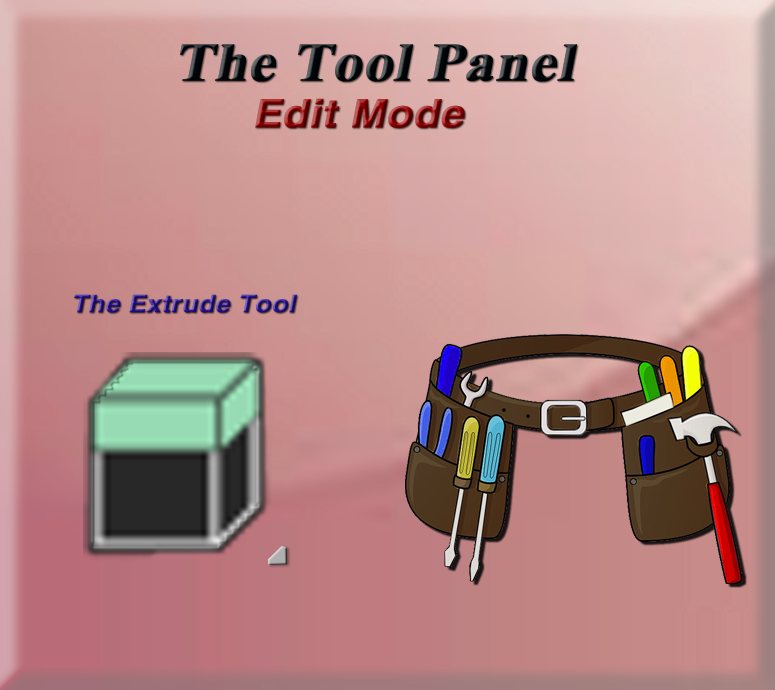
<style>
.page{position:relative;width:775px;height:690px}
.page>*{position:absolute;margin:0}
.t1{font:53.9px "TimesNewRomanPS-BoldMT";color:#000609;font-weight:bold;font-style:italic;scale:1.08 1}
.t2{font:39.1px "HelveticaLTStd-Bold";font-weight:bold;font-style:italic;scale:1.08 1}
.t3{font:53.9px "TimesNewRomanPS-BoldMT";font-weight:bold;font-style:italic;scale:1.08 1}
.t4{font:24.2px "HelveticaLTStd-Bold";font-weight:bold;font-style:italic;scale:1.08 1}
</style>
<div class="page">
<p class="t1" style="left:180px;top:44px;width:397px;height:38px">The Tool Panel</p>
<p class="t2" style="left:255px;top:98px;width:210px;height:30px"><span class="t3"> </span>Edit Mode</p>
<p class="t4" style="left:74px;top:294px;width:223px;height:19px">The Extrude Tool</p>
</div>
